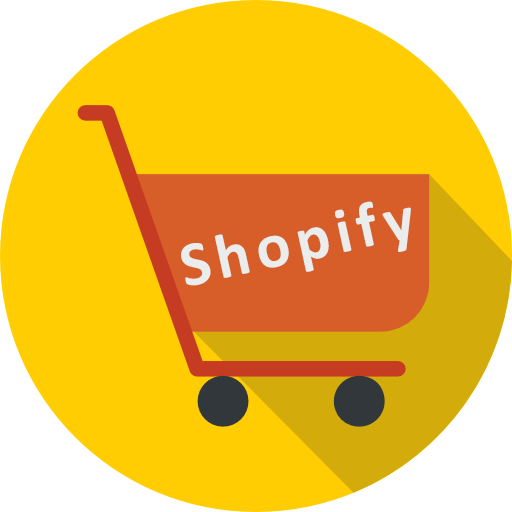
<style>
.page{position:relative;width:512px;height:512px;background:#ffcd02}
.page>*{position:absolute;margin:0}
.t1{font:63.9px "Calibri-Bold";letter-spacing:0.1em;color:#ebeded}
</style>
<div class="page">
<p class="t1" style="left:181px;top:201px;width:230px;height:85px;rotate:-12deg">Shopify</p>
</div>
